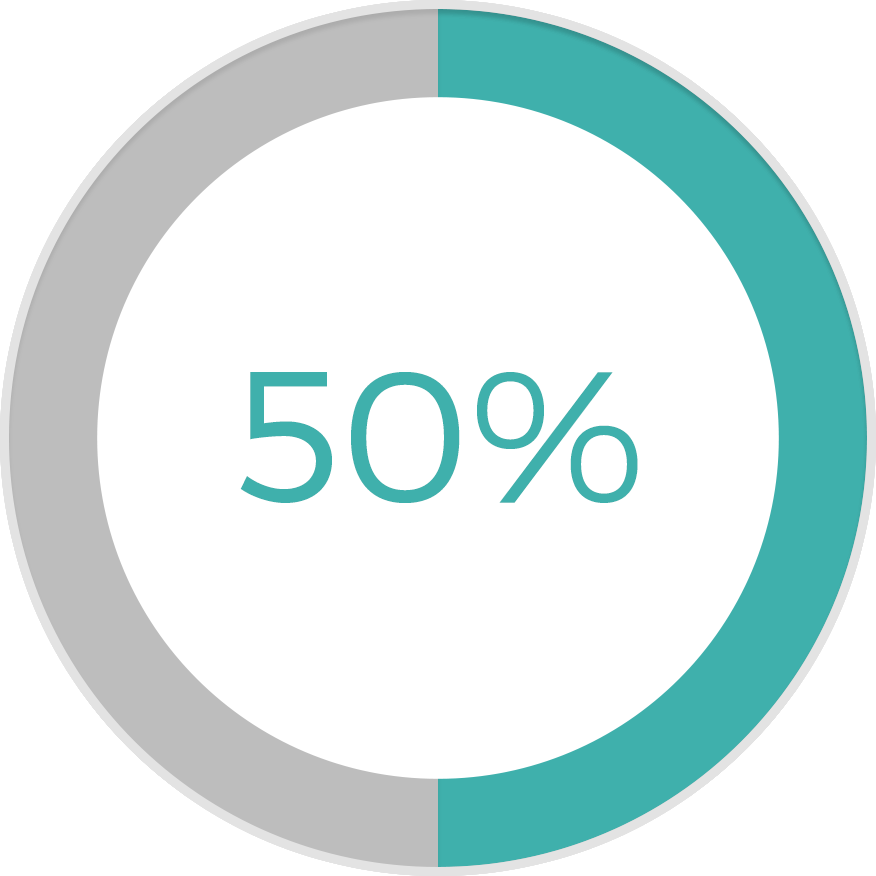
<style>
.page{position:relative;width:876px;height:876px;background:#ffffff}
.page>*{position:absolute;margin:0}
.t1{font:187.4px "Montserrat-Light";color:#3fb0ac}
</style>
<div class="page">
<p class="t1" style="left:239px;top:371px;width:404px;height:133px">80%</p>
<p class="t1" style="left:240px;top:371px;width:402px;height:133px">90%</p>
<p class="t1" style="left:240px;top:372px;width:398px;height:131px">50%</p>
<p class="t1" style="left:241px;top:371px;width:401px;height:133px">60%</p>
<p class="t1" style="left:243px;top:372px;width:394px;height:131px">70%</p>
</div>
